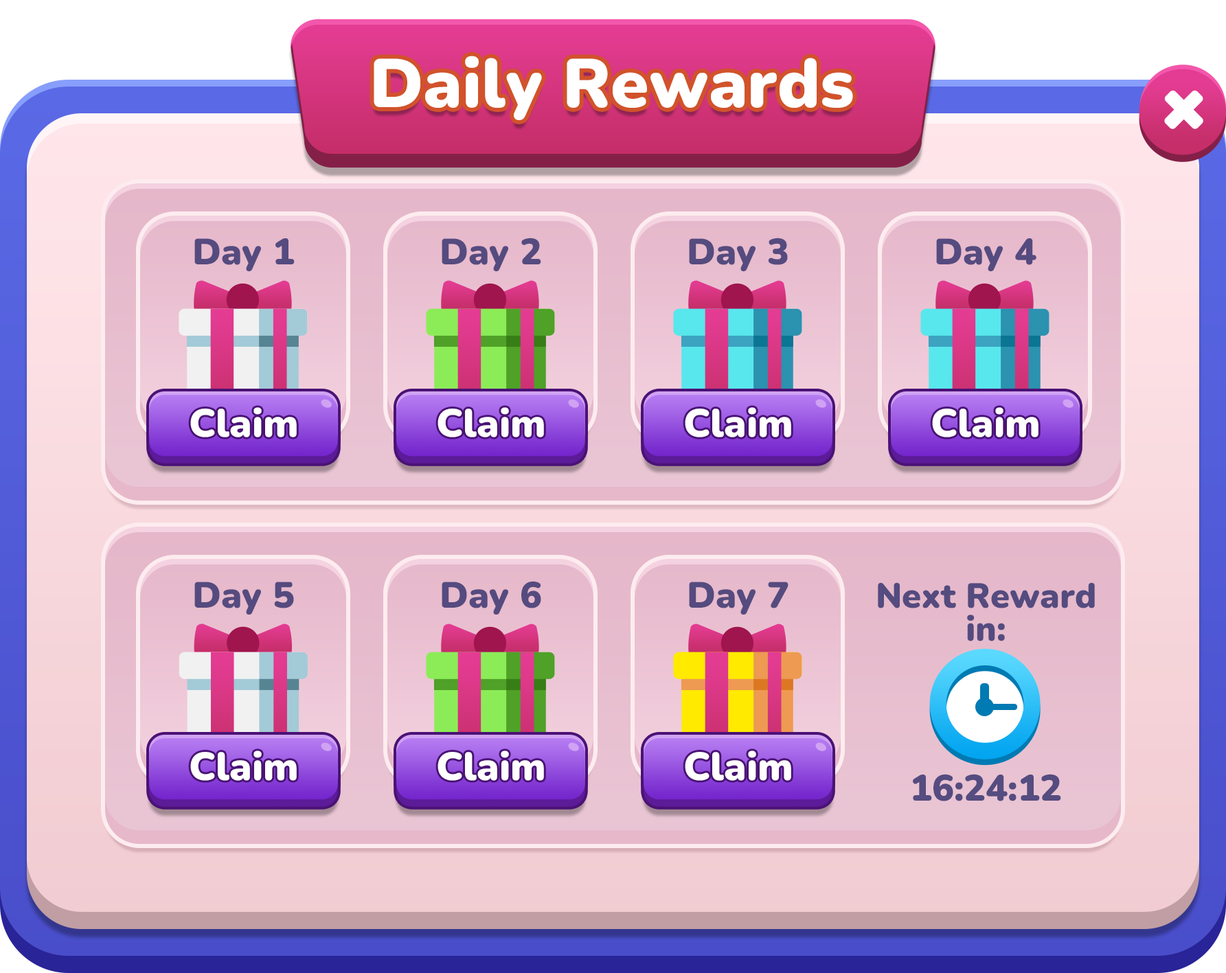
<style>
.page{position:relative;width:1226px;height:973px}
.page>*{position:absolute;margin:0}
.t1{font:68.7px "Nunito-Black";color:#ffffff}
.t2{font:36.6px "Nunito-Black";color:#554b7f}
.t3{font:39.3px "Nunito-Black";color:#ffffff}
.t4{font:34.8px/33px "Nunito-Black";color:#544b7f}
.t5{font:36.6px "Nunito-Black";color:#554c80}
</style>
<div class="page">
<p class="t1" style="left:374px;top:56px;width:479px;height:64px">Daily Rewards</p>
<p class="t2" style="left:194px;top:238px;width:101px;height:33px">Day 1</p>
<p class="t2" style="left:441px;top:238px;width:100px;height:33px">Day 2</p>
<p class="t2" style="left:689px;top:238px;width:99px;height:33px">Day 3</p>
<p class="t2" style="left:936px;top:238px;width:100px;height:33px">Day 4</p>
<p class="t3" style="left:190px;top:407px;width:107px;height:30px">Claim</p>
<p class="t3" style="left:437px;top:407px;width:107px;height:30px">Claim</p>
<p class="t3" style="left:685px;top:407px;width:106px;height:30px">Claim</p>
<p class="t3" style="left:932px;top:407px;width:106px;height:30px">Claim</p>
<p class="t2" style="left:194px;top:582px;width:100px;height:33px">Day 5</p>
<p class="t2" style="left:441px;top:581px;width:100px;height:34px">Day 6</p>
<p class="t2" style="left:689px;top:582px;width:99px;height:33px">Day 7</p>
<p class="t4" style="left:877px;top:582px;width:217px;height:59px;text-align:center">Next Reward<br>in:</p>
<p class="t3" style="left:190px;top:750px;width:107px;height:31px">Claim</p>
<p class="t3" style="left:437px;top:750px;width:107px;height:31px">Claim</p>
<p class="t3" style="left:685px;top:750px;width:106px;height:31px">Claim</p>
<p class="t5" style="left:913px;top:774px;width:148px;height:27px">16:24:12</p>
</div>
